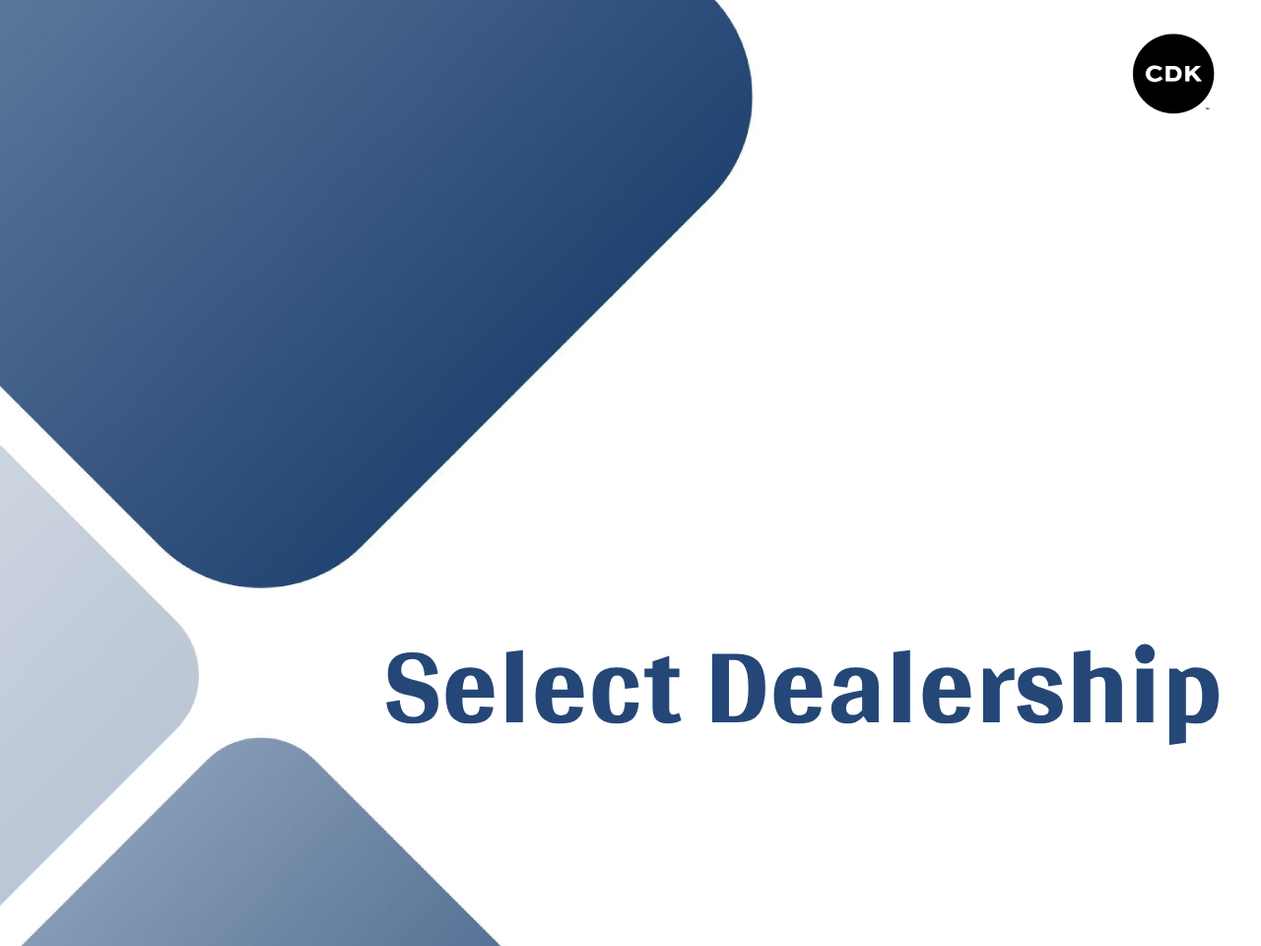
<style>
.page{position:relative;width:1261px;height:946px;background:#ffffff}
.page>*{position:absolute;margin:0}
.t1{font:167.5px "Gidugu";color:#254777}
</style>
<div class="page">
<p class="t1" style="left:386px;top:643px;width:834px;height:102px">Select Dealership</p>
</div>
